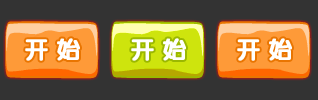
<style>
.page{position:relative;width:318px;height:100px;background:#333333}
.page>*{position:absolute;margin:0}
.t1{font:24px "JCuYuan";letter-spacing:0.3em;color:#fefefe;font-weight:bold}
</style>
<div class="page">
<p class="t1" style="left:25px;top:38px;width:55px;height:23px">开始</p>
<p class="t1" style="left:131px;top:38px;width:55px;height:23px">开始</p>
<p class="t1" style="left:237px;top:38px;width:55px;height:23px">开始</p>
</div>
